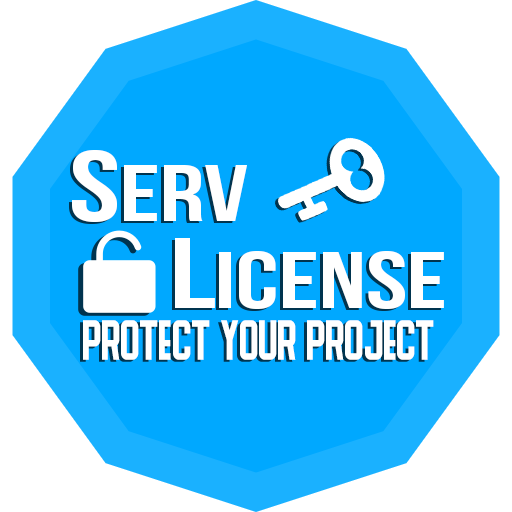
<style>
.page{position:relative;width:512px;height:512px;background:#00a8ff}
.page>*{position:absolute;margin:0}
.t1{font:80px "BebasNeue";color:#ffffff;scale:1.37 1}
.t2{font:99.9px "BebasNeue";color:#ffffff;scale:1.37 1}
.t3{font:45.2px "ZAPPATBlack";color:#ffffff;scale:0.87 1}
</style>
<div class="page">
<p class="t1" style="left:72px;top:150px;width:175px;height:72px"><span class="t2">S</span>erv</p>
<p class="t1" style="left:175px;top:238px;width:269px;height:71px"><span class="t2">L</span>ICENSE</p>
<p class="t3" style="left:83px;top:320px;width:351px;height:40px">Protect your project</p>
</div>
